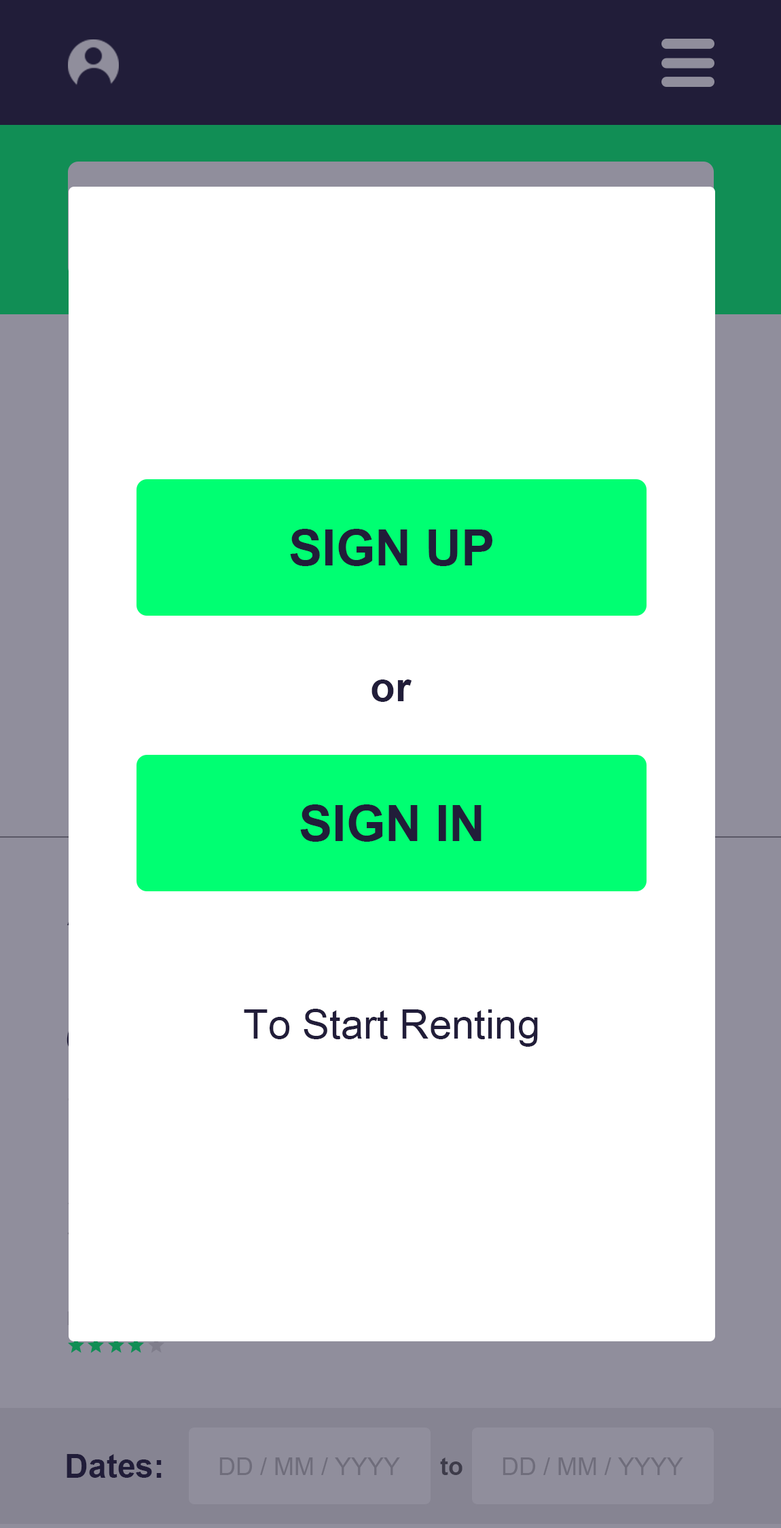
<style>
.page{position:relative;width:781px;height:1528px;background:#ffffff}
.page>*{position:absolute;margin:0}
.t1{font:50px "Arial-BoldMT";color:#211d39}
.t2{font:40.7px "Arial-BoldMT";color:#211d39}
.t3{font:40.7px "ArialMT";color:#211d39}
.t4{font:32.6px "Arial-BoldMT";color:#211d39}
.t5{font:24.4px "ArialMT";color:#6f6d7b}
.t6{font:24.4px "Arial-BoldMT";color:#3e3c4a}
</style>
<div class="page">
<p class="t1" style="left:290px;top:529px;width:202px;height:37px">SIGN UP</p>
<p class="t2" style="left:371px;top:679px;width:40px;height:23px">or</p>
<p class="t1" style="left:300px;top:804px;width:181px;height:38px">SIGN IN</p>
<p class="t3" style="left:244px;top:1009px;width:294px;height:38px">To Start Renting</p>
<p class="t4" style="left:67px;top:1454px;width:95px;height:24px">Dates:</p>
<p class="t5" style="left:219px;top:1457px;width:181px;height:18px">DD / MM / YYYY</p>
<p class="t6" style="left:440px;top:1457px;width:22px;height:18px">to</p>
<p class="t5" style="left:502px;top:1457px;width:181px;height:18px">DD / MM / YYYY</p>
</div>
